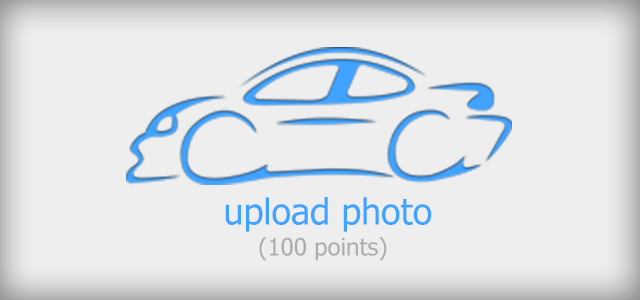
<style>
.page{position:relative;width:640px;height:300px;background:#eeeeee}
.page>*{position:absolute;margin:0}
.t1{font:36px "Tahoma";color:#40a3ff}
.t2{font:24px "Tahoma";color:#adadad}
</style>
<div class="page">
<p class="t1" style="left:225px;top:197px;width:207px;height:35px">upload photo</p>
<p class="t2" style="left:259px;top:237px;width:128px;height:24px">(100 points)</p>
</div>
